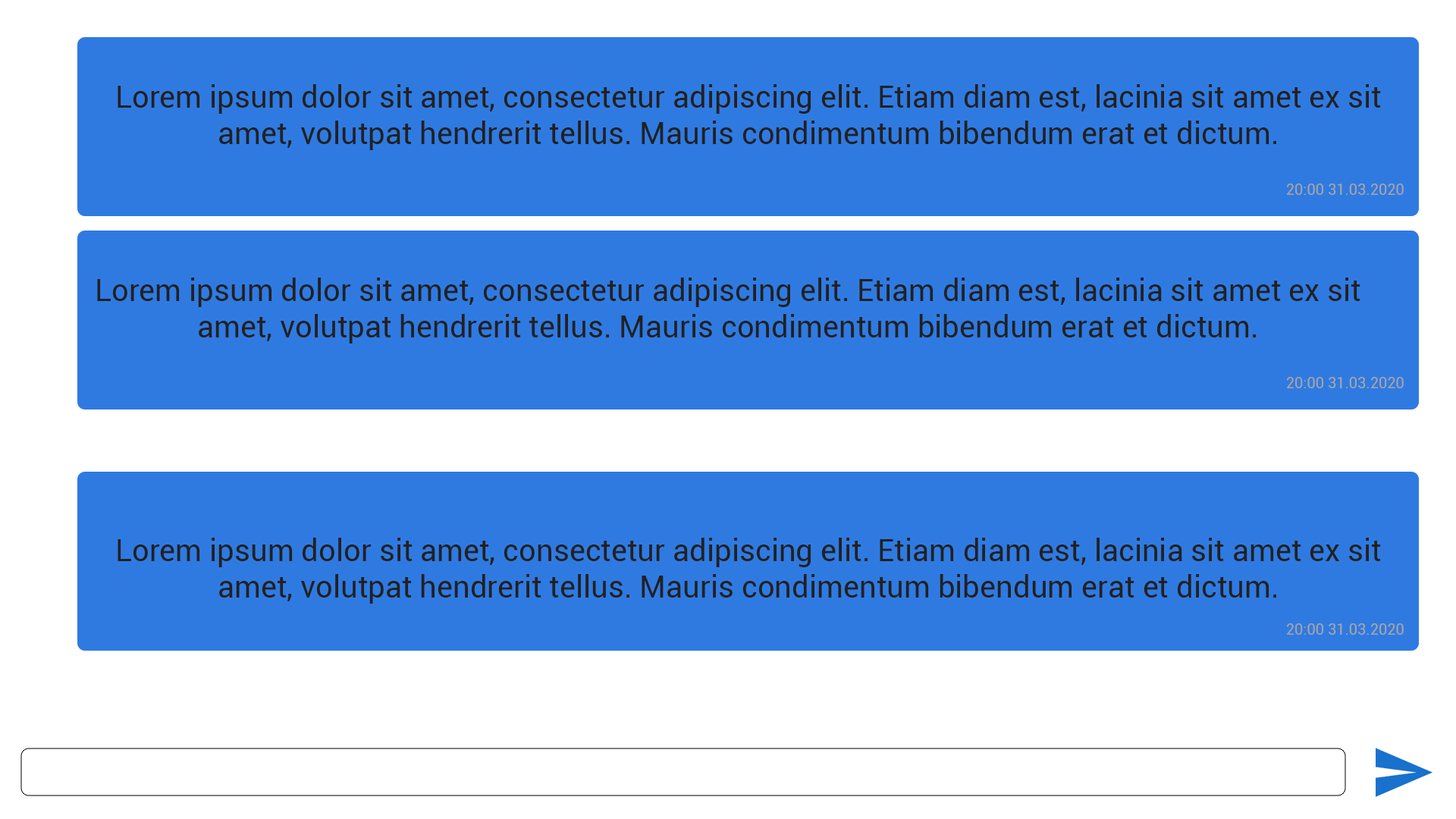
<style>
.page{position:relative;width:1456px;height:819px;background:#2f7ae1}
.page>*{position:absolute;margin:0}
.t1{font:30.3px "Roboto-Regular";color:#212121}
.t2{font:15.2px "Roboto-Regular";color:#a5a4a4}
</style>
<div class="page">
<p class="t1" style="left:118px;top:84px;width:1263px;height:66px;text-align:center">Lorem ipsum dolor sit amet, consectetur adipiscing elit. Etiam diam est, lacinia sit amet ex sit amet, volutpat hendrerit tellus. Mauris condimentum bibendum erat et dictum.</p>
<p class="t2" style="left:1287px;top:184px;width:117px;height:11px">20:00 31.03.2020</p>
<p class="t1" style="left:97px;top:278px;width:1263px;height:66px;text-align:center">Lorem ipsum dolor sit amet, consectetur adipiscing elit. Etiam diam est, lacinia sit amet ex sit amet, volutpat hendrerit tellus. Mauris condimentum bibendum erat et dictum.</p>
<p class="t2" style="left:1287px;top:377px;width:117px;height:11px">20:00 31.03.2020</p>
<p class="t1" style="left:118px;top:538px;width:1263px;height:66px;text-align:center">Lorem ipsum dolor sit amet, consectetur adipiscing elit. Etiam diam est, lacinia sit amet ex sit amet, volutpat hendrerit tellus. Mauris condimentum bibendum erat et dictum.</p>
<p class="t2" style="left:1287px;top:623px;width:117px;height:12px">20:00 31.03.2020</p>
</div>
